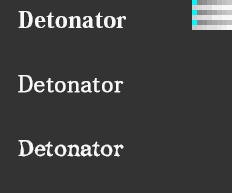
<style>
.page{position:relative;width:232px;height:193px;background:#333333}
.page>*{position:absolute;margin:0}
.t1{font:22px/64px "KozMinPro-Heavy";letter-spacing:0.022em;color:#f8f8f8}
.t2{font:22px/64px "AdobeFangsongStd-Regular";letter-spacing:0.028em;color:#f8f8f8;font-weight:bold}
.t3{font:22px/64px "ComicMysteryStd-DB";letter-spacing:-0.006em;color:#f8f8f8}
</style>
<div class="page">
<p class="t1" style="left:18px;top:11px;width:108px;height:146px">Detonator<br><span class="t2">Detonator<br></span><span class="t3">Detonator</span></p>
</div>
